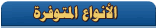
<style>
.page{position:relative;width:157px;height:28px}
.page>*{position:absolute;margin:0}
.t1{font:16px "PTBoldHeading";color:#eec966}
</style>
<div class="page">
<p class="t1" style="left:34px;top:3px;width:83px;height:19px">الأنواع المتوفرة</p>
</div>
